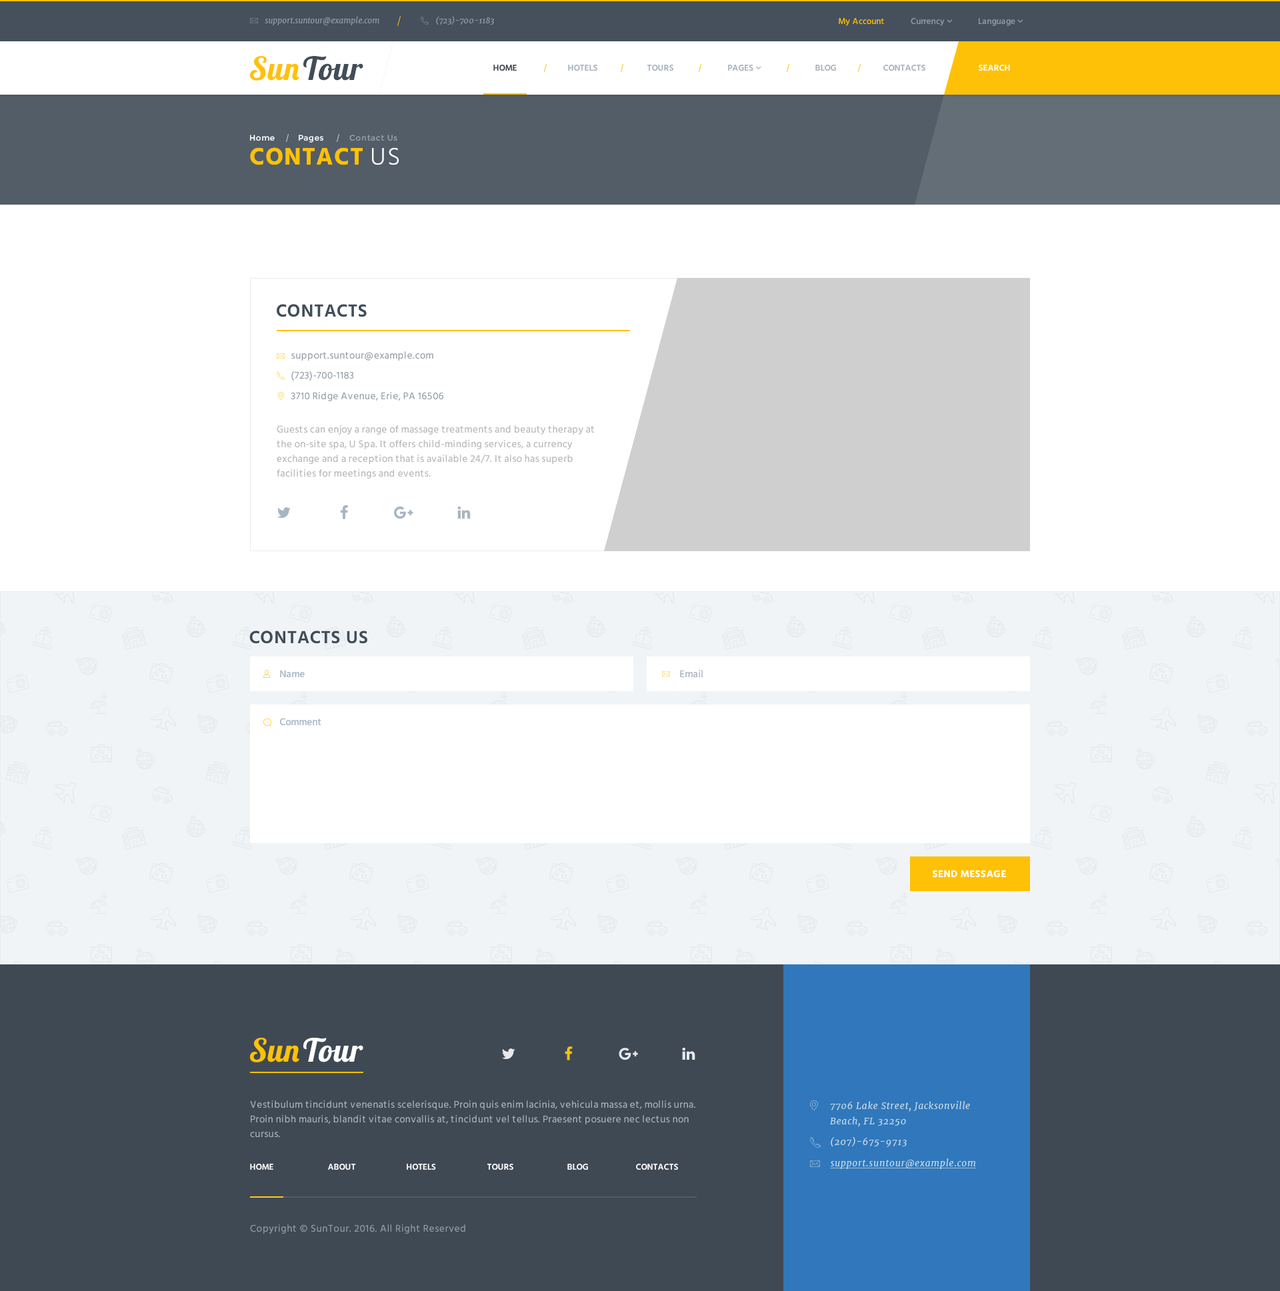
<style>
.page{position:relative;width:1280px;height:1291px;background:#ffffff}
.page>*{position:absolute;margin:0}
.t1{font:8px "Merriweather-Italic";color:#939ea9}
.t2{font:8.7px "HindSiliguri-Medium";letter-spacing:0.01em;color:#ffc107}
.t3{font:32px "LobsterTwo-BoldItalic";letter-spacing:0.02em;color:#424d58}
.t4{font:32px "LobsterTwo-BoldItalic";letter-spacing:0.02em;color:#ffc107}
.t5{font:8.7px "HindSiliguri-SemiBold";color:#424d58;text-transform:uppercase}
.t6{font:8.7px "HindSiliguri-SemiBold";color:#a9b5c1;text-transform:uppercase}
.t7{font:8.7px "HindSiliguri-SemiBold";color:#ffffff;text-transform:uppercase}
.t8{font:8px "Montserrat-Regular";letter-spacing:0.05em;color:#ffffff}
.t9{font:8px "Montserrat-Regular";letter-spacing:0.05em;color:#939ea9}
.t10{font:24.7px "HindSiliguri-Bold";letter-spacing:0.03em;color:#ffc107;text-transform:uppercase}
.t11{font:24.7px "HindSiliguri-Light";letter-spacing:0.03em;color:#ffffff;text-transform:uppercase}
.t12{font:18px "HindSiliguri-SemiBold";letter-spacing:0.03em;color:#424d58;text-transform:uppercase}
.t13{font:10px "HindSiliguri-Regular";letter-spacing:0.03em;color:#939ea9}
.t14{font:10px/14.7px "HindSiliguri-Regular";letter-spacing:0.03em;color:#b5b5b5}
.t15{font:10px "HindSiliguri-Medium";color:#a9b5c1}
.t16{font:10px "HindSiliguri-Bold";letter-spacing:0.03em;color:#ffffff;text-transform:uppercase}
.t17{font:32px "LobsterTwo-BoldItalic";letter-spacing:0.02em;color:#ffffff}
.t18{font:10px/14.7px "HindSiliguri-Regular";letter-spacing:0.03em;color:#a9b5c1}
.t19{font:9.3px/15.3px "Merriweather-Italic";letter-spacing:0.05em;color:#cbdae8}
.t20{font:9.3px "Merriweather-Italic";letter-spacing:0.05em;color:#cbdae8}
.t21{font:9.3px "Merriweather-Italic";letter-spacing:0.05em;color:#cbdae8;text-decoration:underline}
.t22{font:10px "HindSiliguri-Regular";letter-spacing:0.05em;color:#939ea9}
</style>
<div class="page">
<p class="t1" style="left:265px;top:16px;width:114px;height:9px">support.suntour@example.com</p>
<p class="t1" style="left:436px;top:16px;width:58px;height:9px">(723)-700-1183</p>
<p class="t2" style="left:839px;top:18px;width:45px;height:8px">My Account</p>
<p class="t3" style="left:250px;top:56px;width:113px;height:25px"><span class="t4">Sun</span>Tour</p>
<p class="t5" style="left:493px;top:65px;width:24px;height:6px">Home</p>
<p class="t6" style="left:568px;top:65px;width:29px;height:6px">hotels</p>
<p class="t6" style="left:647px;top:65px;width:26px;height:6px">Tours</p>
<p class="t6" style="left:815px;top:65px;width:21px;height:6px">Blog</p>
<p class="t6" style="left:883px;top:65px;width:42px;height:6px">Contacts</p>
<p class="t7" style="left:979px;top:65px;width:31px;height:6px">Search</p>
<p class="t8" style="left:250px;top:135px;width:25px;height:6px">Home</p>
<p class="t8" style="left:299px;top:135px;width:24px;height:8px">Pages</p>
<p class="t9" style="left:349px;top:135px;width:48px;height:6px">Contact Us</p>
<p class="t10" style="left:250px;top:147px;width:149px;height:18px">Contact <span class="t11">Us</span></p>
<p class="t12" style="left:277px;top:304px;width:90px;height:13px">Contacts</p>
<p class="t13" style="left:291px;top:351px;width:142px;height:10px">support.suntour@example.com</p>
<p class="t13" style="left:291px;top:371px;width:63px;height:10px">(723)-700-1183</p>
<p class="t13" style="left:291px;top:392px;width:152px;height:9px">3710 Ridge Avenue, Erie, PA 16506</p>
<p class="t14" style="left:277px;top:425px;width:317px;height:54px">Guests can enjoy a range of massage treatments and beauty therapy at the on-site spa, U Spa. It offers child-minding services, a currency exchange and a reception that is available 24/7. It also has superb facilities for meetings and events.</p>
<p class="t12" style="left:249px;top:631px;width:118px;height:13px">Contacts US</p>
<p class="t15" style="left:280px;top:670px;width:25px;height:7px">Name</p>
<p class="t15" style="left:680px;top:670px;width:23px;height:7px">Email</p>
<p class="t15" style="left:280px;top:718px;width:41px;height:8px">Comment</p>
<p class="t16" style="left:933px;top:870px;width:73px;height:8px">Send message</p>
<p class="t17" style="left:250px;top:1038px;width:113px;height:25px"><span class="t4">Sun</span>Tour</p>
<p class="t18" style="left:250px;top:1101px;width:445px;height:37px">Vestibulum tincidunt venenatis scelerisque. Proin quis enim lacinia, vehicula massa et, mollis urna. Proin nibh mauris, blandit vitae convallis at, tincidunt vel tellus. Praesent posuere nec lectus non cursus.</p>
<p class="t19" style="left:830px;top:1101px;width:140px;height:26px">7706 Lake Street, Jacksonville<br>Beach, FL 32250</p>
<p class="t20" style="left:831px;top:1137px;width:76px;height:10px">(207)-675-9713</p>
<p class="t7" style="left:250px;top:1164px;width:23px;height:6px">Home</p>
<p class="t7" style="left:328px;top:1164px;width:28px;height:7px">About</p>
<p class="t7" style="left:407px;top:1164px;width:29px;height:7px">hotels</p>
<p class="t7" style="left:487px;top:1164px;width:26px;height:7px">Tours</p>
<p class="t7" style="left:567px;top:1164px;width:21px;height:7px">Blog</p>
<p class="t7" style="left:636px;top:1164px;width:42px;height:7px">Contacts</p>
<p class="t21" style="left:830px;top:1159px;width:146px;height:10px">support.suntour@example.com</p>
<p class="t22" style="left:250px;top:1225px;width:215px;height:9px">Copyright © SunTour. 2016. All Right Reserved</p>
</div>
